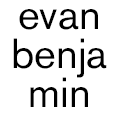
<style>
.page{position:relative;width:118px;height:118px;background:#ffffff}
.page>*{position:absolute;margin:0}
.t1{font:41.7px "AkzidenzGroteskBE-Regular";color:#000000}
</style>
<div class="page">
<p class="t1" style="left:19px;top:9px;width:79px;height:21px">evan</p>
<p class="t1" style="left:13px;top:38px;width:94px;height:40px">benja</p>
<p class="t1" style="left:30px;top:77px;width:58px;height:30px">min</p>
</div>
